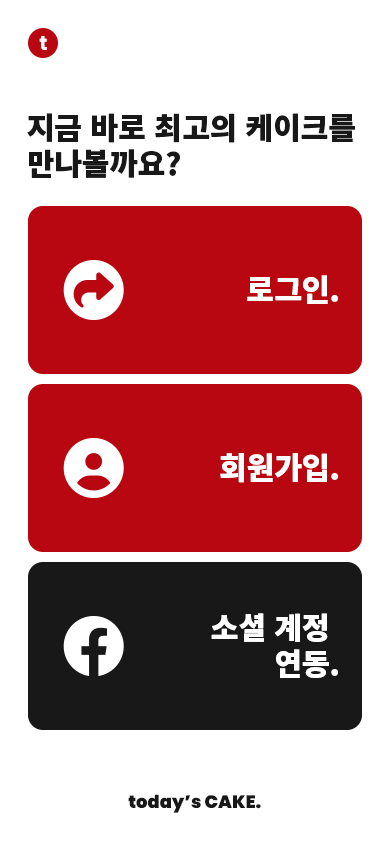
<style>
.page{position:relative;width:390px;height:844px;background:#ffffff}
.page>*{position:absolute;margin:0}
.t1{font:20px "Poppins-Bold";color:#ffffff}
.t2{font:30px/36px "NotoSansKR-Black";color:#181818}
.t3{font:30px "NotoSansKR-Black";color:#ffffff}
.t4{font:30px/36px "NotoSansKR-Black";color:#ffffff}
.t5{font:18px "Poppins-Black";color:#181818}
</style>
<div class="page">
<p class="t1" style="left:39px;top:36px;width:8px;height:14px">t</p>
<p class="t2" style="left:27px;top:113px;width:328px;height:65px">지금 바로 최고의 케이크를<br>만나볼까요?</p>
<p class="t3" style="left:247px;top:275px;width:91px;height:29px">로그인.</p>
<p class="t3" style="left:220px;top:453px;width:118px;height:30px">회원가입.</p>
<p class="t4" style="left:211px;top:613px;width:127px;height:65px;text-align:right">소셜 계정<span class="t2">.<br></span>연동.</p>
<p class="t5" style="left:128px;top:794px;width:133px;height:19px">today’s CAKE.</p>
</div>
